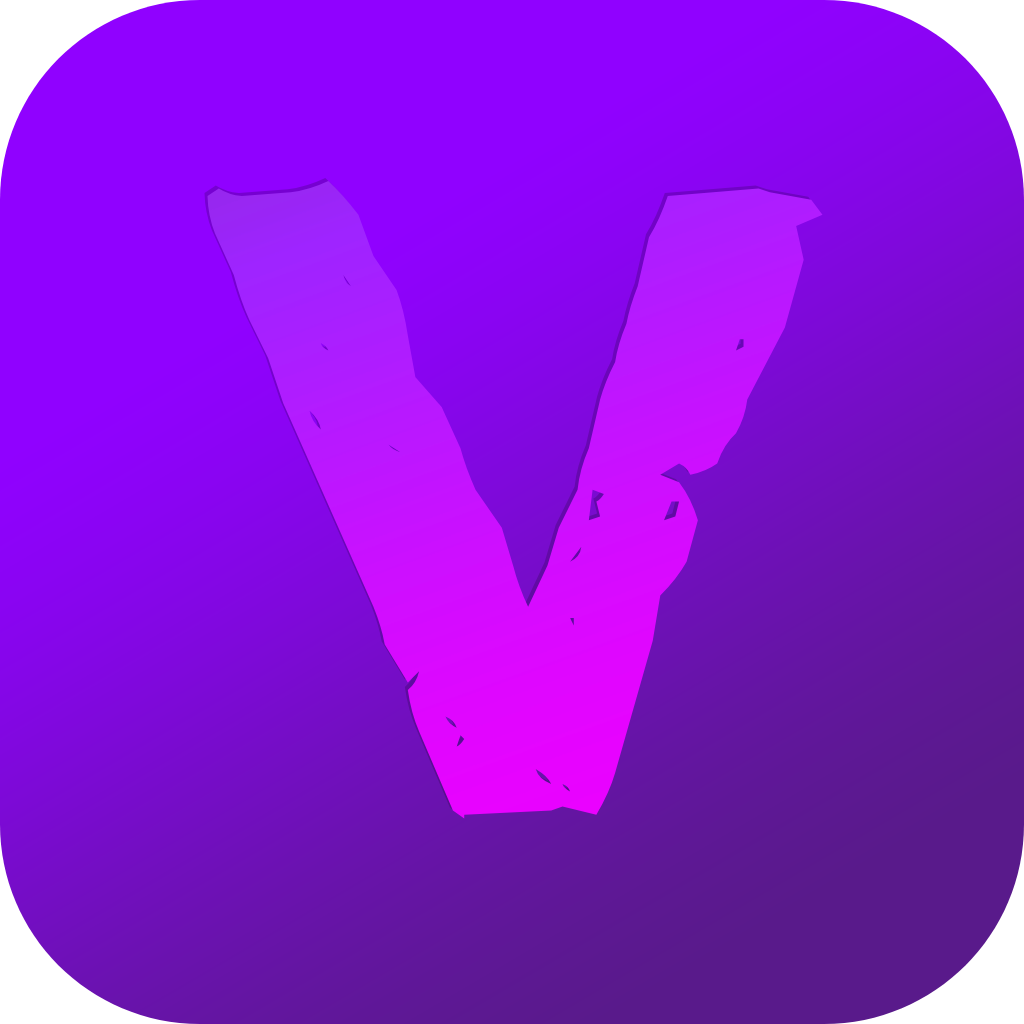
<style>
.page{position:relative;width:1024px;height:1024px}
.page>*{position:absolute;margin:0}
.t1{font:1100px "Xenophone"}
</style>
<div class="page">
<p class="t1" style="left:207px;top:180px;width:616px;height:639px">V</p>
</div>
